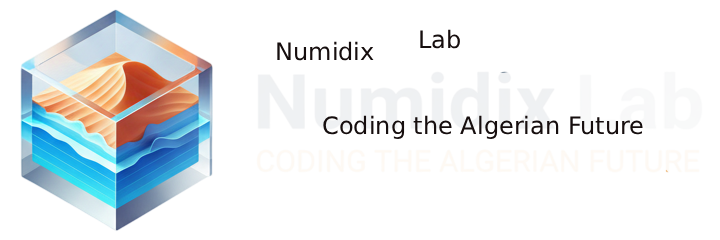
<style>
.page{position:relative;width:720px;height:240px;background:#ffffff}
.page>*{position:absolute;margin:0}
.t1{font:24px "DejaVuSans";color:#160e0e}
</style>
<div class="page">
<p class="t1" style="left:420px;top:29px;width:40px;height:20px">Lab</p>
<p class="t1" style="left:277px;top:41px;width:97px;height:20px">Numidix</p>
<p class="t1" style="left:323px;top:115px;width:320px;height:24px">Coding the Algerian Future</p>
</div>
